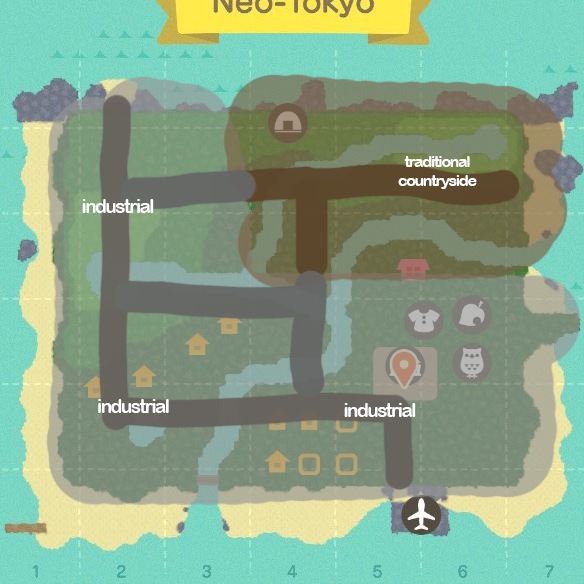
<style>
.page{position:relative;width:584px;height:584px}
.page>*{position:absolute;margin:0}
.t1{font:15.7px "ArialRoundedMTBold";letter-spacing:-0.075em;color:#ffffff}
.t2{font:18.7px "ArialRoundedMTBold";letter-spacing:-0.075em;color:#ffffff}
</style>
<div class="page">
<p class="t1" style="left:398px;top:156px;width:79px;height:33px;text-align:center">traditional<br>countryside</p>
<p class="t2" style="left:82px;top:199px;width:72px;height:14px">industrial</p>
<p class="t2" style="left:98px;top:399px;width:71px;height:14px">industrial</p>
<p class="t2" style="left:344px;top:403px;width:72px;height:14px">industrial</p>
</div>
